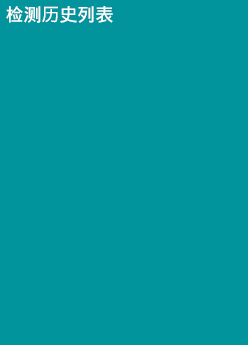
<style>
.page{position:relative;width:248px;height:345px;background:#02949d}
.page>*{position:absolute;margin:0}
.t1{font:18px "LiHeiPro";color:#ffffff}
</style>
<div class="page">
<p class="t1" style="left:6px;top:6px;width:107px;height:17px">检测历史列表</p>
</div>
